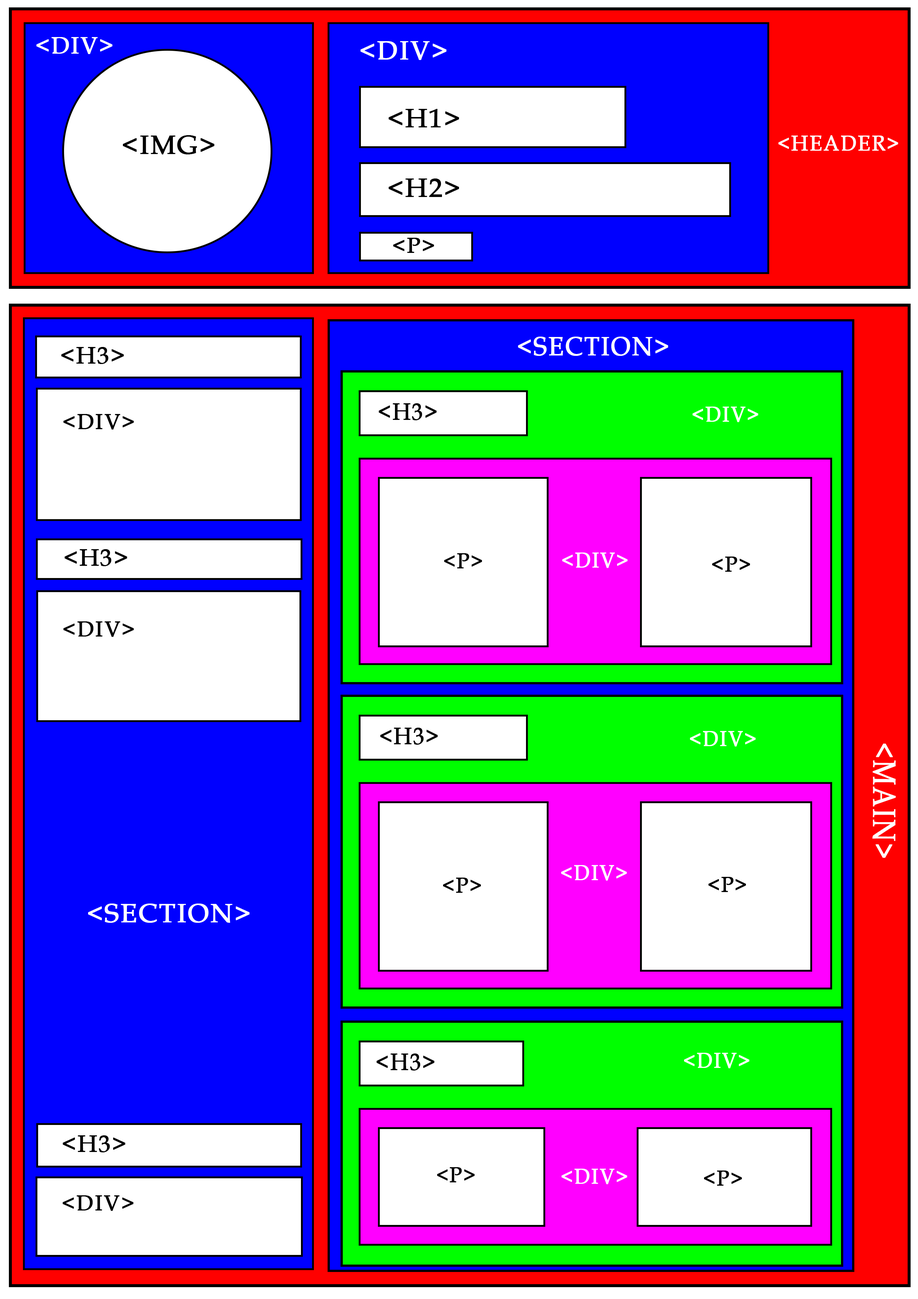
<style>
.page{position:relative;width:918px;height:1299px;background:#ffffff}
.page>*{position:absolute;margin:0}
.t1{font:23.1px "BookAntiqua";letter-spacing:0.05em;color:#ffffff;text-transform:uppercase;font-weight:bold}
.t2{font:26.2px "BookAntiqua";letter-spacing:0.05em;color:#ffffff;text-transform:uppercase;font-weight:bold}
.t3{font:26.2px "BookAntiqua";letter-spacing:0.05em;color:#000000;text-transform:uppercase;font-weight:bold}
.t4{font:21.6px "BookAntiqua";letter-spacing:0.05em;color:#ffffff;text-transform:uppercase;font-weight:bold;scale:0.93 1}
.t5{font:21.6px "BookAntiqua";letter-spacing:0.05em;color:#000000;text-transform:uppercase;font-weight:bold}
.t6{font:26.2px "BookAntiqua";letter-spacing:0.05em;color:#ffffff;text-transform:uppercase;font-weight:bold;scale:0.93 1}
.t7{font:23.1px "BookAntiqua";letter-spacing:0.05em;color:#000000;text-transform:uppercase;font-weight:bold}
.t8{font:23.1px "BookAntiqua";letter-spacing:0.05em;color:#000000;text-transform:uppercase;font-weight:bold;scale:0.93 1}
.t9{font:21.6px "BookAntiqua";letter-spacing:0.05em;color:#000000;text-transform:uppercase;font-weight:bold;scale:0.93 1}
.t10{font:31.9px "BookAntiqua";letter-spacing:0.05em;color:#ffffff;text-transform:uppercase;font-weight:bold;scale:0.81 1}
</style>
<div class="page">
<p class="t1" style="left:36px;top:37px;width:77px;height:17px">&lt;div&gt;</p>
<p class="t2" style="left:361px;top:41px;width:85px;height:19px">&lt;div&gt;</p>
<p class="t3" style="left:389px;top:109px;width:70px;height:18px">&lt;h1&gt;</p>
<p class="t3" style="left:123px;top:135px;width:91px;height:19px">&lt;img&gt;</p>
<p class="t4" style="left:779px;top:135px;width:120px;height:16px">&lt;Header&gt;</p>
<p class="t3" style="left:389px;top:178px;width:70px;height:19px">&lt;h2&gt;</p>
<p class="t5" style="left:393px;top:238px;width:41px;height:15px">&lt;p&gt;</p>
<p class="t6" style="left:518px;top:337px;width:150px;height:19px">&lt;Section&gt;</p>
<p class="t7" style="left:61px;top:347px;width:63px;height:17px">&lt;h3&gt;</p>
<p class="t5" style="left:63px;top:414px;width:71px;height:15px">&lt;Div&gt;</p>
<p class="t8" style="left:379px;top:403px;width:58px;height:17px">&lt;h3&gt;</p>
<p class="t4" style="left:693px;top:407px;width:66px;height:15px">&lt;div&gt;</p>
<p class="t7" style="left:64px;top:549px;width:63px;height:17px">&lt;h3&gt;</p>
<p class="t9" style="left:444px;top:553px;width:38px;height:15px">&lt;p&gt;</p>
<p class="t4" style="left:562px;top:552px;width:66px;height:16px">&lt;div&gt;</p>
<p class="t9" style="left:712px;top:556px;width:38px;height:16px">&lt;p&gt;</p>
<p class="t5" style="left:63px;top:621px;width:71px;height:16px">&lt;div&gt;</p>
<p class="t8" style="left:380px;top:727px;width:58px;height:18px">&lt;h3&gt;</p>
<p class="t4" style="left:690px;top:731px;width:66px;height:15px">&lt;div&gt;</p>
<p class="t10" style="left:873px;top:743px;width:23px;height:115px;rotate:90deg">&lt;MAIN&gt;</p>
<p class="t4" style="left:561px;top:865px;width:66px;height:15px">&lt;div&gt;</p>
<p class="t9" style="left:443px;top:877px;width:38px;height:16px">&lt;p&gt;</p>
<p class="t9" style="left:709px;top:877px;width:37px;height:15px">&lt;p&gt;</p>
<p class="t2" style="left:88px;top:903px;width:162px;height:20px">&lt;Section&gt;</p>
<p class="t8" style="left:377px;top:1053px;width:58px;height:17px">&lt;h3&gt;</p>
<p class="t4" style="left:684px;top:1053px;width:66px;height:15px">&lt;div&gt;</p>
<p class="t7" style="left:63px;top:1135px;width:63px;height:17px">&lt;h3&gt;</p>
<p class="t9" style="left:437px;top:1167px;width:38px;height:15px">&lt;p&gt;</p>
<p class="t4" style="left:562px;top:1168px;width:66px;height:16px">&lt;div&gt;</p>
<p class="t9" style="left:704px;top:1170px;width:38px;height:15px">&lt;p&gt;</p>
<p class="t5" style="left:63px;top:1195px;width:71px;height:16px">&lt;div&gt;</p>
</div>
